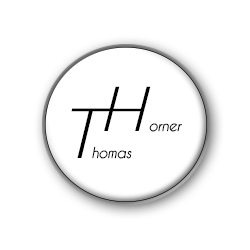
<style>
.page{position:relative;width:250px;height:250px;background:#ffffff}
.page>*{position:absolute;margin:0}
.t1{font:56.6px "CaviarDreams-Italic";color:#000000;scale:1.48 1}
.t2{font:63.6px "CaviarDreams-Italic";color:#000000;scale:1.38 1}
.t3{font:13.9px "CaviarDreams-Italic";color:#000000}
</style>
<div class="page">
<p class="t1" style="left:104px;top:86px;width:47px;height:45px">H</p>
<p class="t2" style="left:71px;top:108px;width:40px;height:50px">T</p>
<p class="t3" style="left:149px;top:123px;width:33px;height:9px">orner</p>
<p class="t3" style="left:92px;top:146px;width:40px;height:13px">homas</p>
</div>
